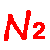
<style>
.page{position:relative;width:50px;height:50px;background:#ffffff}
.page>*{position:absolute;margin:0}
.t1{font:36px "SegoeScript";color:#ff0000;font-weight:bold}
.t2{font:24px "Shruti-Bold";color:#ff0000;font-weight:bold}
</style>
<div class="page">
<p class="t1" style="left:4px;top:10px;width:41px;height:31px">N<span class="t2">2</span></p>
</div>
